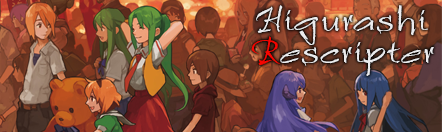
<style>
.page{position:relative;width:442px;height:132px}
.page>*{position:absolute;margin:0}
.t1{font:37px/32px "RulingScriptLTStd-2";color:#ebebed}
.t2{font:37px/32px "RulingScriptLTStd-2";color:#f80500}
</style>
<div class="page">
<p class="t1" style="left:251px;top:5px;width:183px;height:71px;text-align:center">Higurashi<br><span class="t2">R</span>escripter</p>
</div>
